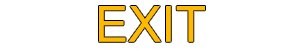
<style>
.page{position:relative;width:300px;height:50px;background:#ffffff}
.page>*{position:absolute;margin:0}
.t1{font:50px "ArialMT";color:#ffba00}
</style>
<div class="page">
<p class="t1" style="left:99px;top:6px;width:106px;height:36px">EXIT</p>
</div>
